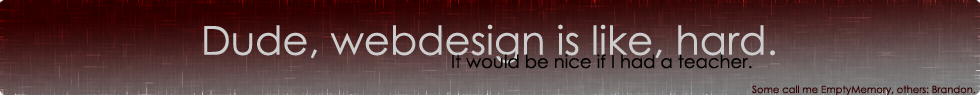
<style>
.page{position:relative;width:980px;height:100px}
.page>*{position:absolute;margin:0}
.t1{font:40px "CenturyGothic";color:#cccccc}
.t2{font:18px "CenturyGothic";color:#000000}
.t3{font:10px "CenturyGothic";color:#330000}
</style>
<div class="page">
<p class="t1" style="left:204px;top:24px;width:571px;height:40px">Dude, webdesign is like, hard.</p>
<p class="t2" style="left:452px;top:54px;width:300px;height:15px">It would be nice if I had a teacher.</p>
<p class="t3" style="left:752px;top:85px;width:223px;height:10px">Some call me EmptyMemory, others: Brandon.</p>
</div>
